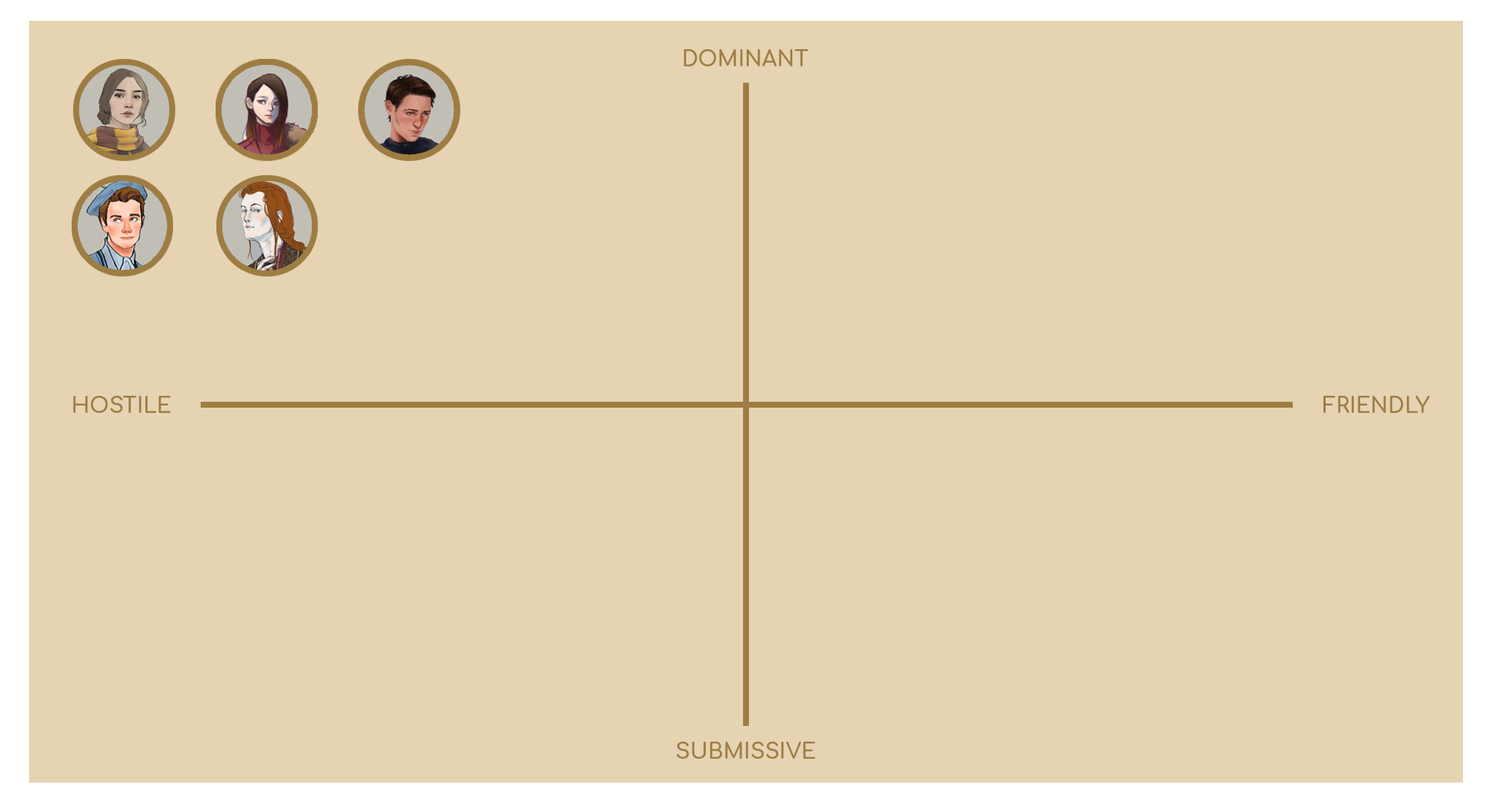
<style>
.page{position:relative;width:1492px;height:799px;background:#e5d3b2}
.page>*{position:absolute;margin:0}
.t1{font:21.1px "Comfortaa-Bold";color:#9d7d42}
</style>
<div class="page">
<p class="t1" style="left:683px;top:49px;width:125px;height:17px">DOMINANT</p>
<p class="t1" style="left:73px;top:396px;width:98px;height:17px">HOSTILE</p>
<p class="t1" style="left:1323px;top:396px;width:107px;height:17px">FRIENDLY</p>
<p class="t1" style="left:676px;top:742px;width:139px;height:17px">SUBMISSIVE</p>
</div>
